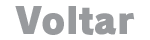
<style>
.page{position:relative;width:150px;height:40px;background:#ffffff}
.page>*{position:absolute;margin:0}
.t1{font:36px "RodinPro-UB";color:#989a9d}
</style>
<div class="page">
<p class="t1" style="left:15px;top:6px;width:120px;height:29px">Voltar</p>
</div>
